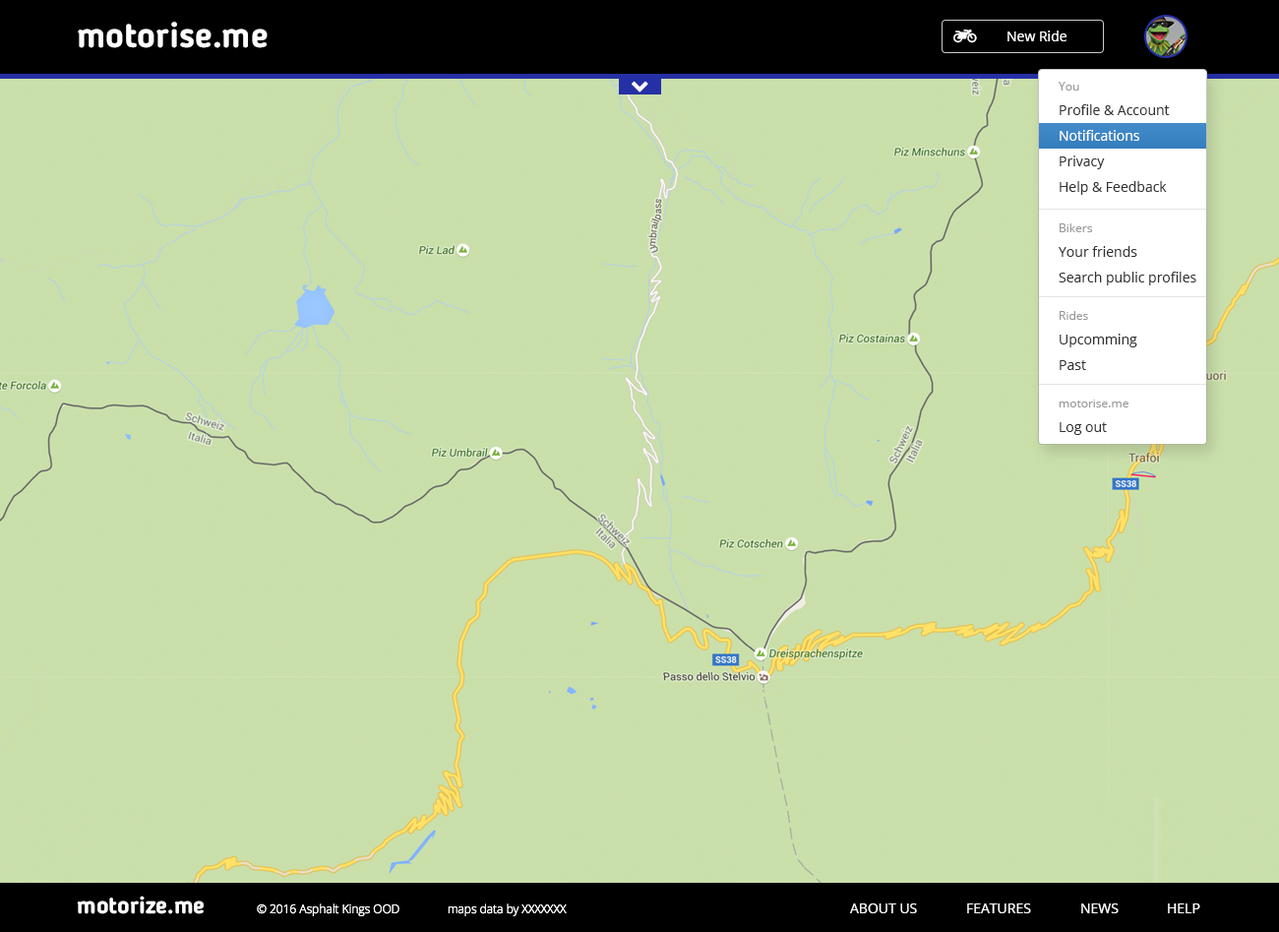
<style>
.page{position:relative;width:1279px;height:932px;background:#cadfaa}
.page>*{position:absolute;margin:0}
.t1{font:35.4px "BloggerSans-Bold";color:#ffffff}
.t2{font:13.8px "OpenSans";color:#ffffff}
.t3{font:11.8px "OpenSans";color:#999999}
.t4{font:13.8px/25.6px "OpenSans";color:#333333}
.t5{font:13.8px/25.6px "OpenSans";color:#ffffff}
.t6{font:13.8px "OpenSans";color:#333333}
.t7{font:23.6px "BloggerSans-Bold";color:#ffffff}
.t8{font:11.8px "OpenSans-Light";color:#ffffff}
</style>
<div class="page">
<p class="t1" style="left:78px;top:22px;width:190px;height:26px">motorise.me</p>
<p class="t2" style="left:1008px;top:31px;width:59px;height:10px">New Ride</p>
<p class="t3" style="left:1059px;top:82px;width:21px;height:9px">You</p>
<p class="t4" style="left:1060px;top:104px;width:110px;height:91px">Profile &amp; Account<br><span class="t5">Notifications<br></span>Privacy<br>Help &amp; Feedback</p>
<p class="t3" style="left:1060px;top:223px;width:32px;height:9px">Bikers</p>
<p class="t4" style="left:1059px;top:246px;width:138px;height:39px">Your friends<br>Search public profiles</p>
<p class="t3" style="left:1060px;top:311px;width:28px;height:9px">Rides</p>
<p class="t4" style="left:1060px;top:334px;width:78px;height:36px">Upcomming<br>Past</p>
<p class="t3" style="left:1059px;top:400px;width:70px;height:7px">motorise.me</p>
<p class="t6" style="left:1060px;top:422px;width:47px;height:13px">Log out</p>
<p class="t7" style="left:77px;top:896px;width:127px;height:18px">motorize.me</p>
<p class="t8" style="left:257px;top:903px;width:143px;height:13px">© 2016 Asphalt Kings OOD</p>
<p class="t8" style="left:448px;top:903px;width:119px;height:13px">maps data by XXXXXXX</p>
<p class="t2" style="left:850px;top:903px;width:67px;height:10px">ABOUT US</p>
<p class="t2" style="left:967px;top:903px;width:64px;height:10px">FEATURES</p>
<p class="t2" style="left:1082px;top:903px;width:37px;height:10px">NEWS</p>
<p class="t2" style="left:1168px;top:903px;width:33px;height:10px">HELP</p>
</div>
